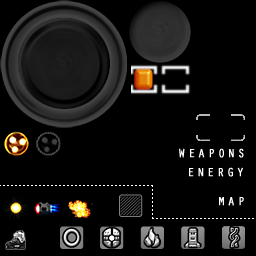
<style>
.page{position:relative;width:256px;height:256px;background:#000000}
.page>*{position:absolute;margin:0}
.t1{font:12px "OratorStd";letter-spacing:0.2em;color:#ffffff;font-weight:bold}
</style>
<div class="page">
<p class="t1" style="left:179px;top:148px;width:65px;height:10px">WEAPONS</p>
<p class="t1" style="left:189px;top:167px;width:54px;height:10px">ENERGY</p>
<p class="t1" style="left:219px;top:197px;width:25px;height:9px">MAP</p>
</div>
